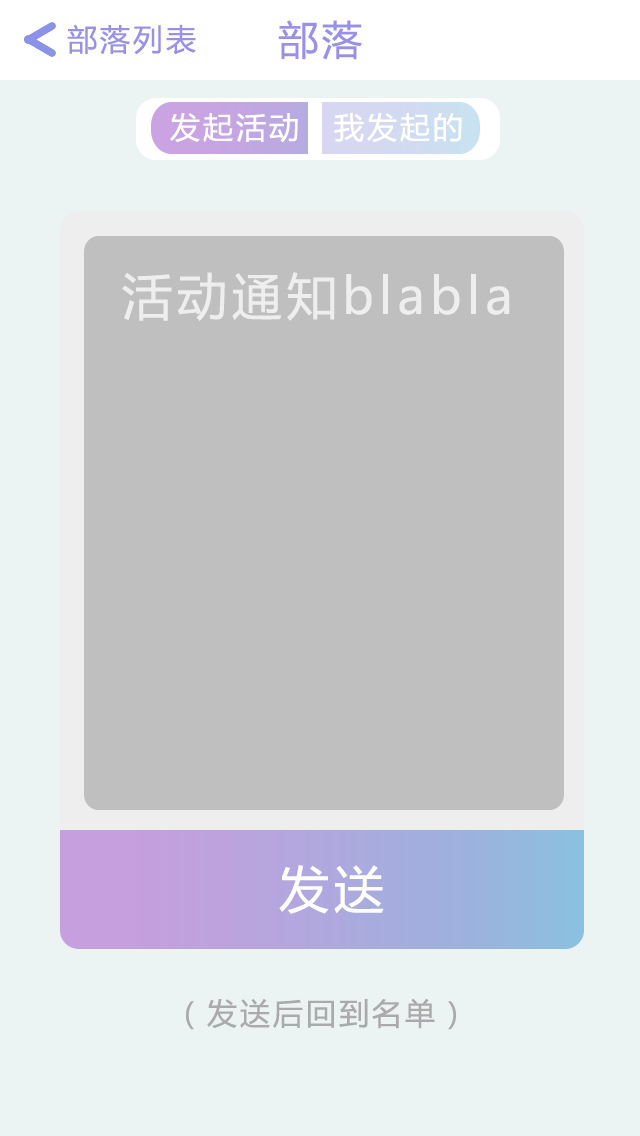
<style>
.page{position:relative;width:640px;height:1136px;background:#bfbfbf}
.page>*{position:absolute;margin:0}
.t1{font:30px "MicrosoftYaHei";letter-spacing:0.1em;color:#9991e8}
.t2{font:40px "MicrosoftYaHei";letter-spacing:0.1em;color:#9991e8}
.t3{font:30px "MicrosoftYaHei";letter-spacing:0.1em;color:#ffffff}
.t4{font:50px "MicrosoftYaHei";letter-spacing:0.1em;color:#eeeeee}
.t5{font:50px "MicrosoftYaHei";letter-spacing:0.1em;color:#ffffff}
.t6{font:30px "MicrosoftYaHei";letter-spacing:0.1em;color:#abaaaa}
</style>
<div class="page">
<p class="t1" style="left:67px;top:24px;width:129px;height:31px">部落列表</p>
<p class="t2" style="left:278px;top:20px;width:84px;height:40px">部落</p>
<p class="t3" style="left:170px;top:112px;width:128px;height:31px">发起活动</p>
<p class="t3" style="left:334px;top:112px;width:128px;height:31px">我发起的</p>
<p class="t4" style="left:122px;top:272px;width:388px;height:49px">活动通知blabla</p>
<p class="t5" style="left:279px;top:865px;width:105px;height:49px">发送</p>
<p class="t6" style="left:186px;top:998px;width:270px;height:32px">（发送后回到名单）</p>
</div>
